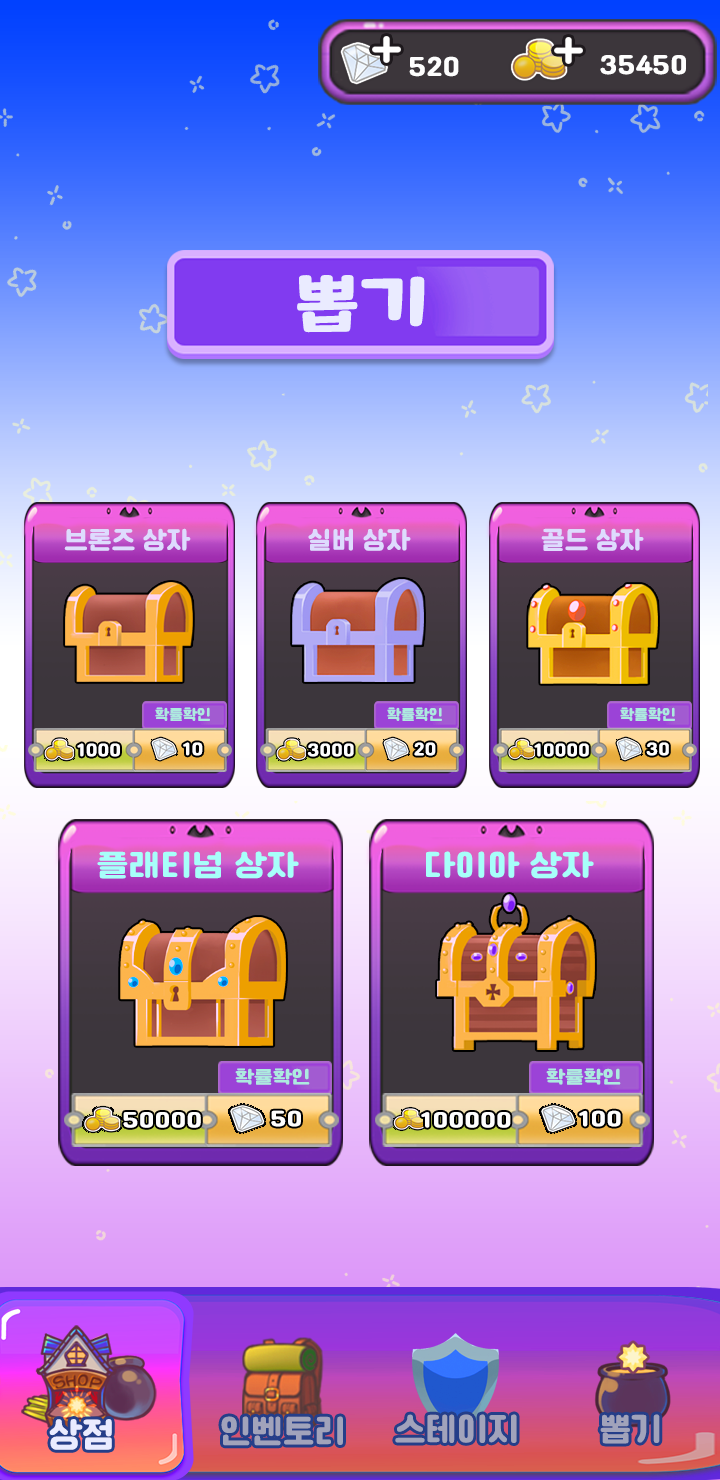
<style>
.page{position:relative;width:720px;height:1480px}
.page>*{position:absolute;margin:0}
.t1{font:25px "Cafe24Ssurround";color:#fefefe}
.t2{font:62.1px "MaplestoryBold";color:#eaebff;scale:1.3 1}
.t3{font:25px "Cafe24Ssurround";color:#dedbfe}
.t4{font:14.8px "Cafe24Ssurround";color:#adeadf}
.t5{font:16.6px "Cafe24Ssurround";color:#fefefe}
.t6{font:30.3px "Cafe24Ssurround";color:#a7fffa;scale:1.11 1}
.t7{font:18px "Cafe24Ssurround";color:#adeadf;scale:1.11 1}
.t8{font:20.2px "Cafe24Ssurround";color:#fefefe;scale:1.12 1}
.t9{font:35px "Cafe24Ssurround";color:#eaebff}
.t10{font:33px "Cafe24Ssurround";color:#a1a3bb}
</style>
<div class="page">
<p class="t1" style="left:409px;top:56px;width:50px;height:21px">520</p>
<p class="t1" style="left:600px;top:55px;width:86px;height:20px">35450</p>
<p class="t2" style="left:297px;top:275px;width:128px;height:58px">뽑기</p>
<p class="t3" style="left:64px;top:528px;width:127px;height:23px">브론즈 상자</p>
<p class="t3" style="left:308px;top:528px;width:103px;height:23px">실버 상자</p>
<p class="t3" style="left:541px;top:528px;width:103px;height:23px">골드 상자</p>
<p class="t4" style="left:155px;top:707px;width:55px;height:14px">확률확인</p>
<p class="t4" style="left:387px;top:707px;width:55px;height:14px">확률확인</p>
<p class="t4" style="left:620px;top:707px;width:55px;height:14px">확률확인</p>
<p class="t5" style="left:77px;top:743px;width:43px;height:14px">1000</p>
<p class="t5" style="left:183px;top:742px;width:20px;height:14px">10</p>
<p class="t5" style="left:307px;top:743px;width:47px;height:14px">3000</p>
<p class="t5" style="left:414px;top:742px;width:22px;height:14px">20</p>
<p class="t5" style="left:534px;top:743px;width:55px;height:14px">10000</p>
<p class="t5" style="left:646px;top:742px;width:23px;height:14px">30</p>
<p class="t6" style="left:97px;top:851px;width:202px;height:28px">플래티넘 상자</p>
<p class="t6" style="left:426px;top:851px;width:168px;height:28px">다이아 상자</p>
<p class="t7" style="left:235px;top:1068px;width:75px;height:17px">확률확인</p>
<p class="t7" style="left:546px;top:1068px;width:75px;height:17px">확률확인</p>
<p class="t8" style="left:271px;top:1110px;width:30px;height:17px">50</p>
<p class="t8" style="left:579px;top:1110px;width:42px;height:17px">100</p>
<p class="t8" style="left:123px;top:1112px;width:78px;height:16px">50000</p>
<p class="t8" style="left:421px;top:1112px;width:90px;height:16px">100000</p>
<p class="t9" style="left:49px;top:1419px;width:63px;height:31px">상점</p>
<p class="t10" style="left:221px;top:1416px;width:122px;height:30px">인벤토리</p>
<p class="t10" style="left:395px;top:1414px;width:122px;height:29px">스테이지</p>
<p class="t10" style="left:600px;top:1414px;width:60px;height:30px">뽑기</p>
</div>
